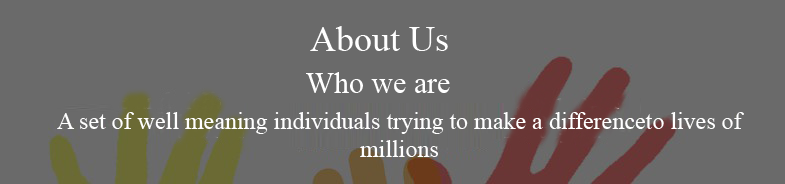
<style>
.page{position:relative;width:785px;height:184px;background:#6a6a6a}
.page>*{position:absolute;margin:0}
.t1{font:36px "TimesNewRomanPSMT";color:#ffffff}
.t2{font:30px "TimesNewRomanPSMT";color:#ffffff}
.t3{font:24px "TimesNewRomanPSMT";color:#ffffff}
</style>
<div class="page">
<p class="t1" style="left:310px;top:26px;width:138px;height:25px">About Us</p>
<p class="t2" style="left:306px;top:72px;width:144px;height:21px">Who we are</p>
<p class="t3" style="left:57px;top:112px;width:687px;height:45px;text-align:center">A set of well meaning individuals trying to make a differenceto lives of millions</p>
</div>
